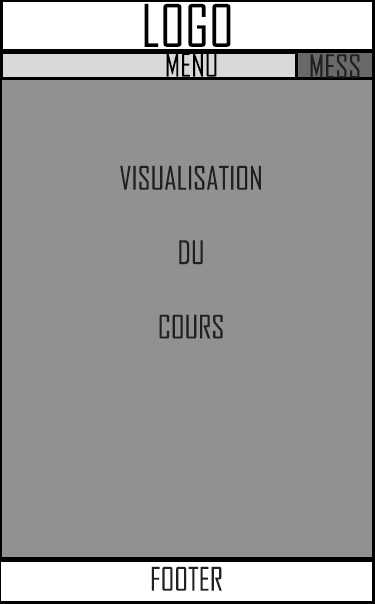
<style>
.page{position:relative;width:375px;height:604px;background:#929090}
.page>*{position:absolute;margin:0}
.t1{font:56px "AgencyFB-Reg";color:#000000}
.t2{font:31px "AgencyFB-Reg";color:#000000}
.t3{font:31px "AgencyFB-Reg";color:#202020}
</style>
<div class="page">
<p class="t1" style="left:144px;top:3px;width:87px;height:44px">LOGO</p>
<p class="t2" style="left:166px;top:52px;width:51px;height:25px">MENU</p>
<p class="t3" style="left:310px;top:54px;width:50px;height:24px">MESS</p>
<p class="t3" style="left:120px;top:165px;width:141px;height:174px;text-align:center">VISUALISATION<br><br>DU<br><br>COURS</p>
<p class="t3" style="left:151px;top:566px;width:71px;height:25px">FOOTER</p>
</div>
